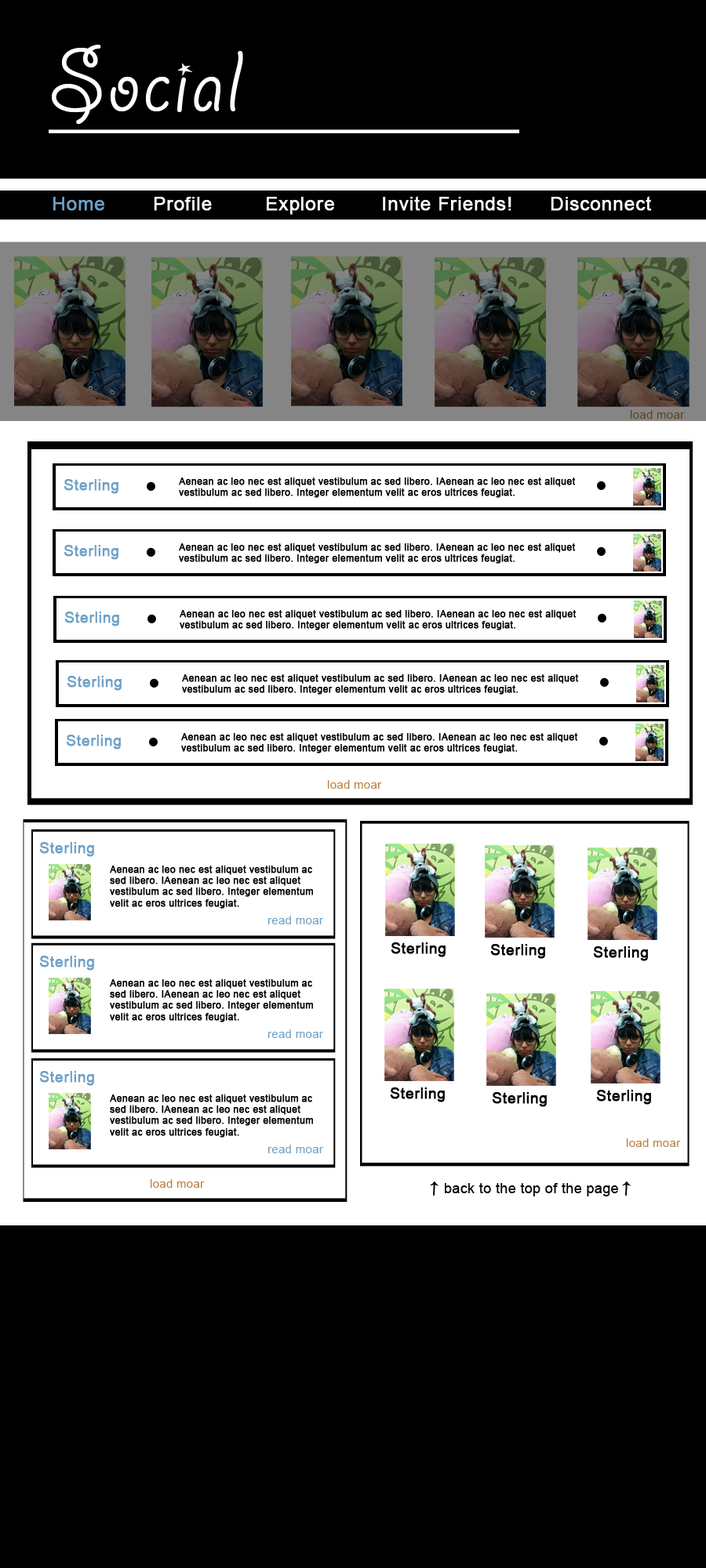
<style>
.page{position:relative;width:706px;height:1568px;background:#000000}
.page>*{position:absolute;margin:0}
.t1{font:97.2px "GiddyupStd";letter-spacing:0.02em;color:#ffffff}
.t2{font:18.8px "ArialMT";letter-spacing:0.02em;color:#6fa1c7;font-weight:bold}
.t3{font:18.8px "ArialMT";letter-spacing:0.02em;color:#ffffff;font-weight:bold}
.t4{font:11.8px "ArialMT";letter-spacing:0.02em;color:#614322}
.t5{font:14.9px "ArialMT";letter-spacing:0.02em;color:#6fa1c7;font-weight:bold}
.t6{font:9.4px "ArialMT";letter-spacing:0.02em;color:#000000;font-weight:bold}
.t7{font:11.8px "ArialMT";letter-spacing:0.02em;color:#ba8042}
.t8{font:11.8px "ArialMT";letter-spacing:0.02em;color:#6fa1c7}
.t9{font:14.9px "ArialMT";letter-spacing:0.02em;color:#000000;font-weight:bold}
.t10{font:14.1px "ArialMT";letter-spacing:0.02em;color:#000000}
</style>
<div class="page">
<p class="t1" style="left:52px;top:45px;width:191px;height:80px">Social</p>
<p class="t2" style="left:53px;top:197px;width:51px;height:14px">Home</p>
<p class="t3" style="left:154px;top:197px;width:58px;height:14px">Profile</p>
<p class="t3" style="left:267px;top:197px;width:67px;height:18px">Explore</p>
<p class="t3" style="left:383px;top:196px;width:128px;height:15px">Invite Friends!</p>
<p class="t3" style="left:550px;top:196px;width:102px;height:15px">Disconnect</p>
<p class="t4" style="left:630px;top:410px;width:54px;height:9px">load moar</p>
<p class="t5" style="left:64px;top:479px;width:54px;height:15px">Sterling</p>
<p class="t6" style="left:179px;top:477px;width:396px;height:21px">Aenean ac leo nec est aliquet vestibulum ac sed libero. IAenean ac leo nec est aliquet vestibulum ac sed libero. Integer elementum velit ac eros ultrices feugiat.</p>
<p class="t5" style="left:64px;top:545px;width:54px;height:15px">Sterling</p>
<p class="t6" style="left:179px;top:543px;width:396px;height:21px">Aenean ac leo nec est aliquet vestibulum ac sed libero. IAenean ac leo nec est aliquet vestibulum ac sed libero. Integer elementum velit ac eros ultrices feugiat.</p>
<p class="t5" style="left:64px;top:612px;width:55px;height:14px">Sterling</p>
<p class="t6" style="left:180px;top:610px;width:396px;height:20px">Aenean ac leo nec est aliquet vestibulum ac sed libero. IAenean ac leo nec est aliquet vestibulum ac sed libero. Integer elementum velit ac eros ultrices feugiat.</p>
<p class="t5" style="left:67px;top:676px;width:55px;height:15px">Sterling</p>
<p class="t6" style="left:182px;top:674px;width:397px;height:21px">Aenean ac leo nec est aliquet vestibulum ac sed libero. IAenean ac leo nec est aliquet vestibulum ac sed libero. Integer elementum velit ac eros ultrices feugiat.</p>
<p class="t5" style="left:66px;top:735px;width:55px;height:15px">Sterling</p>
<p class="t6" style="left:181px;top:733px;width:397px;height:20px">Aenean ac leo nec est aliquet vestibulum ac sed libero. IAenean ac leo nec est aliquet vestibulum ac sed libero. Integer elementum velit ac eros ultrices feugiat.</p>
<p class="t7" style="left:327px;top:780px;width:55px;height:9px">load moar</p>
<p class="t5" style="left:39px;top:842px;width:55px;height:15px">Sterling</p>
<p class="t6" style="left:110px;top:866px;width:203px;height:43px">Aenean ac leo nec est aliquet vestibulum ac sed libero. IAenean ac leo nec est aliquet vestibulum ac sed libero. Integer elementum velit ac eros ultrices feugiat.</p>
<p class="t8" style="left:267px;top:916px;width:56px;height:8px">read moar</p>
<p class="t9" style="left:390px;top:942px;width:55px;height:15px">Sterling</p>
<p class="t9" style="left:490px;top:944px;width:55px;height:15px">Sterling</p>
<p class="t9" style="left:593px;top:946px;width:55px;height:15px">Sterling</p>
<p class="t5" style="left:39px;top:956px;width:55px;height:15px">Sterling</p>
<p class="t6" style="left:110px;top:979px;width:203px;height:43px">Aenean ac leo nec est aliquet vestibulum ac sed libero. IAenean ac leo nec est aliquet vestibulum ac sed libero. Integer elementum velit ac eros ultrices feugiat.</p>
<p class="t8" style="left:267px;top:1029px;width:56px;height:9px">read moar</p>
<p class="t5" style="left:39px;top:1071px;width:55px;height:15px">Sterling</p>
<p class="t6" style="left:110px;top:1094px;width:203px;height:44px">Aenean ac leo nec est aliquet vestibulum ac sed libero. IAenean ac leo nec est aliquet vestibulum ac sed libero. Integer elementum velit ac eros ultrices feugiat.</p>
<p class="t9" style="left:390px;top:1087px;width:55px;height:15px">Sterling</p>
<p class="t9" style="left:492px;top:1092px;width:54px;height:15px">Sterling</p>
<p class="t9" style="left:596px;top:1090px;width:55px;height:15px">Sterling</p>
<p class="t8" style="left:267px;top:1145px;width:56px;height:8px">read moar</p>
<p class="t7" style="left:626px;top:1138px;width:55px;height:9px">load moar</p>
<p class="t7" style="left:150px;top:1179px;width:55px;height:9px">load moar</p>
<p class="t10" style="left:445px;top:1183px;width:173px;height:13px">back to the top of the page</p>
</div>
